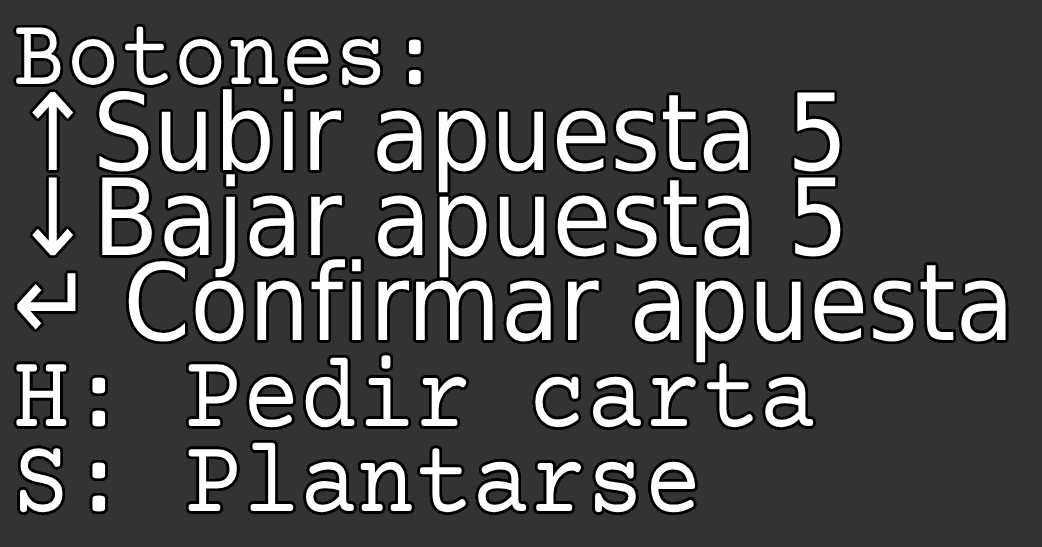
<style>
.page{position:relative;width:1042px;height:547px;background:#333333}
.page>*{position:absolute;margin:0}
.t1{font:106.4px/85.3px "DejaVuSans";color:#ffffff;scale:0.9 1}
.t2{font:97.4px "CourierPrime-Regular";color:#ffffff;scale:0.92 1}
.t3{font:106.4px/85.3px "CourierPrime-Regular";color:#ffffff;scale:0.9 1}
</style>
<div class="page">
<p class="t1" style="left:16px;top:26px;width:990px;height:487px"><span class="t2">Botones:<br></span>↑Subir apuesta 5<br>↓Bajar apuesta 5<br>↵ Confirmar apuesta<br><span class="t3">H: Pedir carta<br>S: Plantarse</span></p>
</div>
